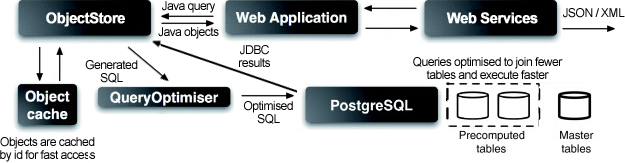
<style>
.page{position:relative;width:625px;height:163px;background:#ffffff}
.page>*{position:absolute;margin:0}
.t1{font:12.1px/13px "ArialMT";letter-spacing:-0.045em;color:#000000}
.t2{font:14.5px "Arial-BoldMT";letter-spacing:-0.045em;color:#ffffff;font-weight:bold}
.t3{font:12.1px "ArialMT";letter-spacing:-0.045em;color:#000000}
</style>
<div class="page">
<p class="t1" style="left:158px;top:1px;width:61px;height:38px;text-align:center">Java query<br><br>Java objects</p>
<p class="t2" style="left:446px;top:12px;width:92px;height:12px">Web Services</p>
<p class="t3" style="left:563px;top:8px;width:62px;height:10px">JSON / XML</p>
<p class="t1" style="left:239px;top:45px;width:31px;height:22px;text-align:center">JDBC<br>results</p>
<p class="t1" style="left:85px;top:60px;width:53px;height:23px;text-align:center">Generated<br>SQL</p>
<p class="t1" style="left:413px;top:57px;width:150px;height:22px;text-align:center">Queries optimised to join fewer<br>tables and execute faster</p>
<p class="t1" style="left:244px;top:101px;width:49px;height:23px;text-align:center">Optimised<br>SQL</p>
<p class="t1" style="left:0px;top:137px;width:95px;height:25px;text-align:center">Objects are cached<br>by id for fast access</p>
</div>
